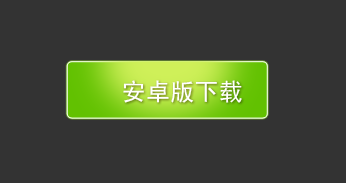
<style>
.page{position:relative;width:346px;height:183px;background:#333333}
.page>*{position:absolute;margin:0}
.t1{font:24.3px "SimHei";color:#ffffff}
</style>
<div class="page">
<p class="t1" style="left:123px;top:80px;width:119px;height:23px">安卓版下载</p>
</div>
